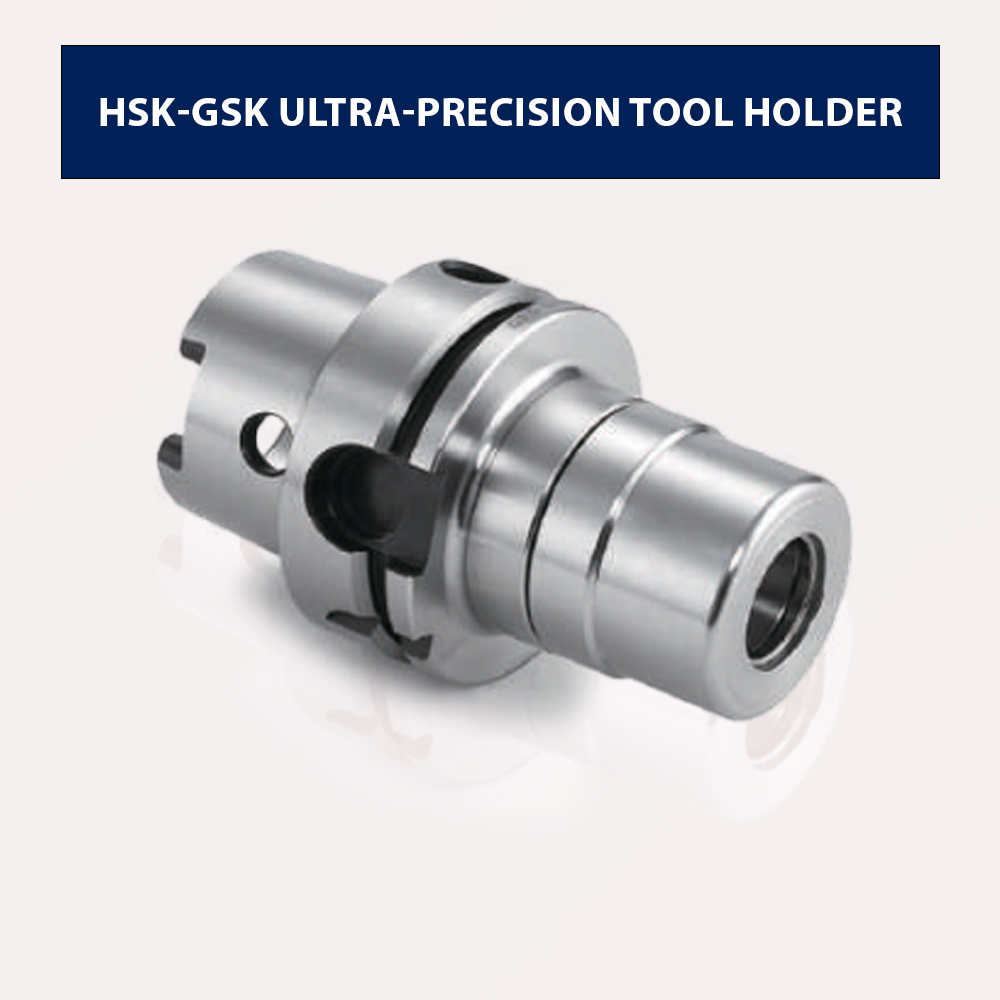
<style>
.page{position:relative;width:1000px;height:1000px;background:#f5efef}
.page>*{position:absolute;margin:0}
.t1{font:41.4px "MyriadPro-Bold";color:#ffffff;text-transform:uppercase}
</style>
<div class="page">
<p class="t1" style="left:100px;top:98px;width:802px;height:28px">HSK-GSK Ultra-Precision Tool Holder</p>
</div>
